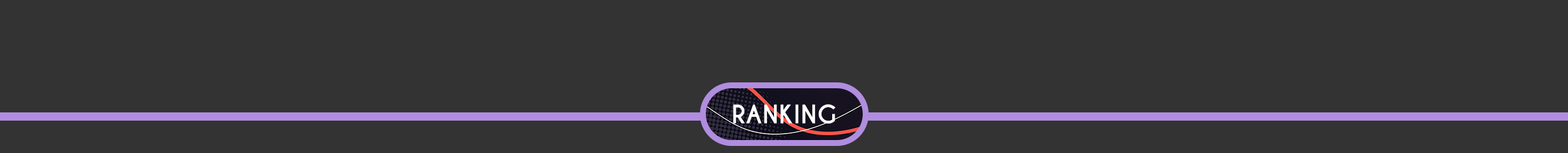
<style>
.page{position:relative;width:1568px;height:153px;background:#333333}
.page>*{position:absolute;margin:0}
.t1{font:23.5px "CaviarDreams-Bold";letter-spacing:0.01em;color:#ffffff;font-weight:bold}
</style>
<div class="page">
<p class="t1" style="left:733px;top:104px;width:103px;height:19px">RANKING</p>
</div>
